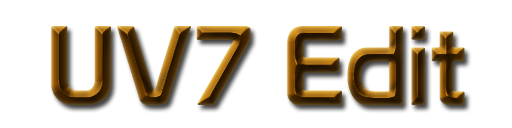
<style>
.page{position:relative;width:512px;height:128px;background:#ffffff}
.page>*{position:absolute;margin:0}
.t1{font:110px "Prototype"}
</style>
<div class="page">
<p class="t1" style="left:51px;top:26px;width:414px;height:80px">UV7 Edit</p>
</div>
